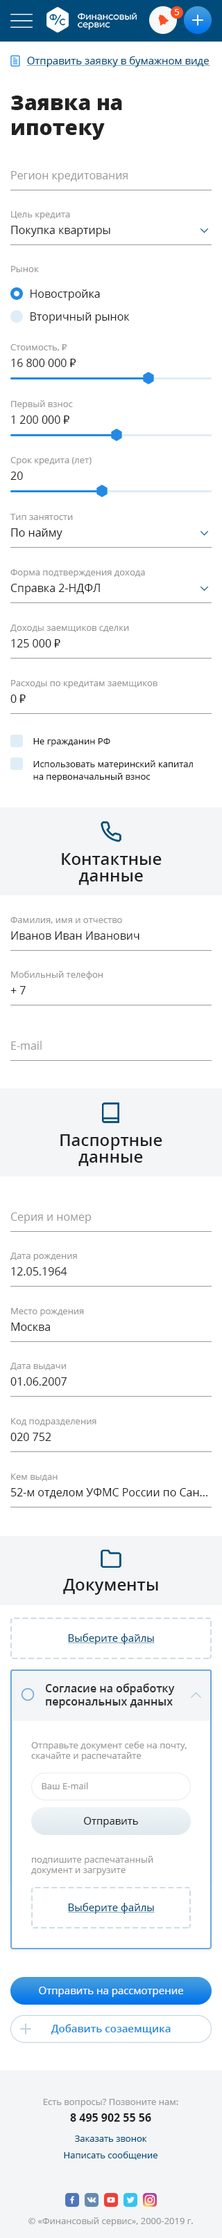
<style>
.page{position:relative;width:222px;height:2238px;background:#ffffff}
.page>*{position:absolute;margin:0}
.t1{font:9px "OpenSans";color:#ffffff}
.t2{font:10.4px "OpenSans";color:#004b7a}
.t3{font:20.8px "OpenSans-Extrabold";color:#222222}
.t4{font:11.1px "OpenSans";color:#999999}
.t5{font:9px "OpenSans";color:#999999}
.t6{font:11.1px/16.6px "OpenSans";color:#222222}
.t7{font:11.1px "OpenSans";color:#222222}
.t8{font:9px "Tahoma";color:#999999}
.t9{font:11.1px/16.6px "Tahoma";color:#222222}
.t10{font:9px "OpenSans";color:#222222}
.t11{font:9px/12.5px "OpenSans";color:#222222}
.t12{font:16.6px/16.6px "OpenSans-Semibold";color:#222222}
.t13{font:9px/16.6px "OpenSans";color:#999999}
.t14{font:16.6px "OpenSans-Semibold";color:#222222}
.t15{font:11.1px "OpenSans-Semibold";color:#333333}
.t16{font:10.4px "OpenSans";color:#222222}
.t17{font:10.4px "OpenSans";color:#ffffff}
.t18{font:10.4px "OpenSans-Semibold";color:#2389e5}
.t19{font:11.1px/16.6px "OpenSans-Bold";color:#222222}
.t20{font:9px/16.6px "OpenSans";color:#004b7a}
</style>
<div class="page">
<p class="t1" style="left:174px;top:9px;width:5px;height:6px">5</p>
<p class="t2" style="left:27px;top:56px;width:181px;height:11px">Отправить заявку в бумажном виде</p>
<p class="t3" style="left:11px;top:96px;width:111px;height:44px">Заявка на ипотеку</p>
<p class="t4" style="left:11px;top:171px;width:116px;height:11px"><span class="t5"> <br></span>Регион кредитования</p>
<p class="t6" style="left:11px;top:211px;width:99px;height:26px"><span class="t5">Цель кредита<br></span>Покупка квартиры</p>
<p class="t5" style="left:11px;top:266px;width:28px;height:6px">Рынок</p>
<p class="t7" style="left:30px;top:289px;width:70px;height:11px">Новостройка</p>
<p class="t7" style="left:30px;top:312px;width:99px;height:11px">Вторичный рынок</p>
<p class="t5" style="left:10px;top:344px;width:66px;height:23px">Стоимость, <span class="t8">₽<br></span><span class="t6">16 800 000 </span><span class="t9">₽</span></p>
<p class="t5" style="left:11px;top:400px;width:62px;height:24px">Первый взнос <br><span class="t6">1 200 000 </span><span class="t9">₽</span></p>
<p class="t5" style="left:10px;top:457px;width:81px;height:23px">Срок кредита (лет)<br><span class="t6">20</span></p>
<p class="t5" style="left:10px;top:514px;width:63px;height:25px">Тип занятости<br><span class="t6">По найму</span></p>
<p class="t5" style="left:10px;top:569px;width:135px;height:26px">Форма подтверждения дохода<br><span class="t6">Справка 2-НДФЛ</span></p>
<p class="t5" style="left:10px;top:624px;width:119px;height:23px">Доходы заемщиков сделки<br><span class="t6">125 000 </span><span class="t9">₽</span></p>
<p class="t5" style="left:10px;top:680px;width:147px;height:23px">Расходы по кредитам заемщиков<br><span class="t6">0 </span><span class="t9">₽</span></p>
<p class="t10" style="left:33px;top:738px;width:77px;height:8px">Не гражданин РФ</p>
<p class="t11" style="left:33px;top:760px;width:159px;height:22px">Использовать материнский капитал на первоначальный взнос</p>
<p class="t12" style="left:62px;top:853px;width:99px;height:32px;text-align:center">Контактные <br>данные</p>
<p class="t13" style="left:10px;top:917px;width:129px;height:22px">Фамилия, имя и отчество<br><span class="t6">Иванов Иван Иванович</span></p>
<p class="t5" style="left:10px;top:971px;width:92px;height:23px">Мобильный телефон<br><span class="t6">+ 7</span></p>
<p class="t4" style="left:11px;top:1041px;width:31px;height:9px"><span class="t5"> <br></span>E-mail</p>
<p class="t12" style="left:60px;top:1134px;width:102px;height:32px;text-align:center">Паспортные <br>данные</p>
<p class="t4" style="left:10px;top:1212px;width:81px;height:11px"><span class="t5"> <br></span>Серия и номер</p>
<p class="t5" style="left:10px;top:1252px;width:67px;height:23px">Дата рождения<br><span class="t6">12.05.1964</span></p>
<p class="t5" style="left:11px;top:1308px;width:73px;height:23px">Место рождения<br><span class="t6">Москва</span></p>
<p class="t5" style="left:10px;top:1362px;width:56px;height:23px">Дата выдачи<br><span class="t6">01.06.2007</span></p>
<p class="t5" style="left:10px;top:1418px;width:86px;height:23px">Код подразделения<br><span class="t6">020 752</span></p>
<p class="t6" style="left:11px;top:1473px;width:196px;height:25px"><span class="t5">Кем выдан<br></span>52-м отделом УФМС России по Сан...</p>
<p class="t14" style="left:63px;top:1578px;width:95px;height:16px">Документы</p>
<p class="t2" style="left:68px;top:1633px;width:86px;height:11px">Выберите файлы</p>
<p class="t15" style="left:45px;top:1683px;width:129px;height:25px">Согласие на обработку персональных данных</p>
<p class="t15" style="left:45px;top:1683px;width:129px;height:25px">Согласие на обработку персональных данных</p>
<p class="t5" style="left:31px;top:1741px;width:155px;height:20px">Отправьте документ себе на почту, скачайте и распечатайте</p>
<p class="t5" style="left:42px;top:1782px;width:46px;height:7px">Ваш E-mail</p>
<p class="t16" style="left:84px;top:1817px;width:54px;height:10px">Отправить</p>
<p class="t5" style="left:31px;top:1855px;width:122px;height:20px">подпишите распечатанный документ и загрузите</p>
<p class="t2" style="left:68px;top:1902px;width:86px;height:12px">Выберите файлы</p>
<p class="t17" style="left:39px;top:1986px;width:144px;height:11px">Отправить на рассмотрение</p>
<p class="t18" style="left:51px;top:2024px;width:119px;height:10px">Добавить созаемщика</p>
<p class="t13" style="left:43px;top:2098px;width:135px;height:23px;text-align:center">Есть вопросы? Позвоните нам:<br><span class="t19">8 495 902 55 56</span></p>
<p class="t20" style="left:64px;top:2135px;width:93px;height:24px;text-align:center">Заказать звонок          <br>Написать сообщение</p>
<p class="t5" style="left:28px;top:2217px;width:164px;height:9px">© «Финансовый сервис», 2000-2019 г.</p>
</div>
